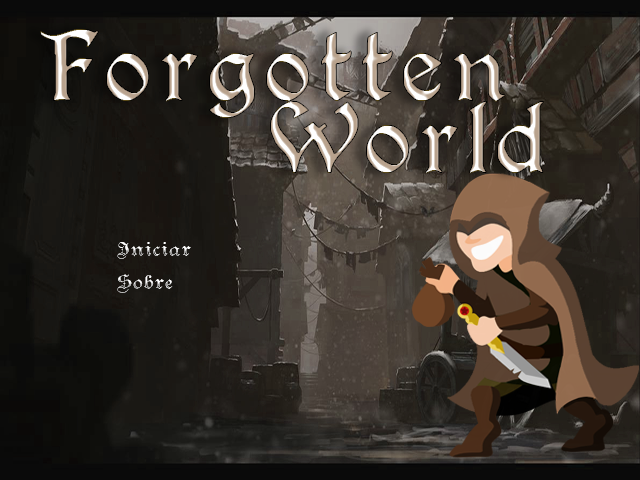
<style>
.page{position:relative;width:640px;height:480px}
.page>*{position:absolute;margin:0}
.t1{font:72px/72px "PerryGothic";letter-spacing:0.1em}
.t2{font:16px "TeutonicNo3-DemiBold";letter-spacing:0.1em;color:#ffffff}
</style>
<div class="page">
<p class="t1" style="left:40px;top:29px;width:504px;height:145px">Forgotten<br>      World</p>
<p class="t2" style="left:117px;top:242px;width:74px;height:17px">Iniciar</p>
<p class="t2" style="left:117px;top:274px;width:56px;height:19px">Sobre</p>
</div>
